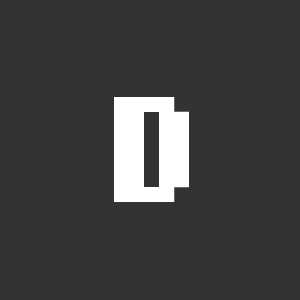
<style>
.page{position:relative;width:300px;height:300px;background:#333333}
.page>*{position:absolute;margin:0}
.t1{font:150px "Hardpixel";color:#ffffff}
</style>
<div class="page">
<p class="t1" style="left:114px;top:97px;width:75px;height:105px">D</p>
</div>
